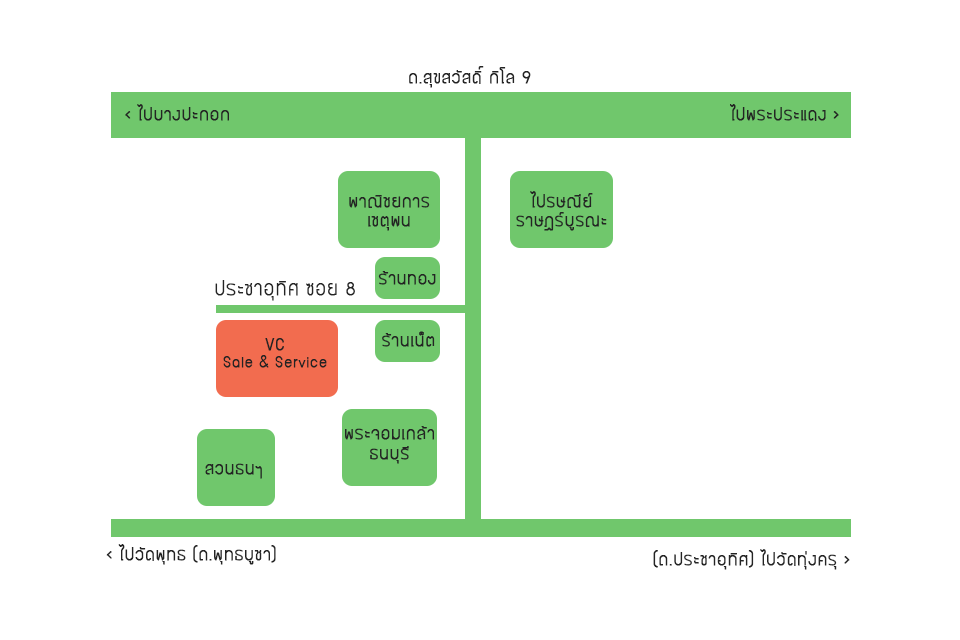
<style>
.page{position:relative;width:960px;height:640px;background:#ffffff}
.page>*{position:absolute;margin:0}
.t1{font:16px "BangnaNew";color:#242424;font-weight:bold}
.t2{font:18px "BangnaNew";color:#242424;font-weight:bold}
.t3{font:14px "BangnaNew";color:#242424;font-weight:bold}
</style>
<div class="page">
<p class="t1" style="left:409px;top:66px;width:122px;height:22px">ถ.สุขสวัสดิ์ กิโล 9</p>
<p class="t1" style="left:125px;top:104px;width:104px;height:17px">&lt; ไปบางปะกอก</p>
<p class="t1" style="left:730px;top:104px;width:109px;height:17px">ไปพระประแดง &gt;</p>
<p class="t1" style="left:349px;top:195px;width:81px;height:36px;text-align:center">พาณิชยการ<br>เชตุพน</p>
<p class="t1" style="left:516px;top:191px;width:91px;height:40px;text-align:center">ไปรษณีย์<br>ราษฎร์บูรณะ</p>
<p class="t2" style="left:215px;top:280px;width:140px;height:21px">ประชาอุทิศ ซอย 8</p>
<p class="t1" style="left:378px;top:271px;width:58px;height:14px">ร้านทอง</p>
<p class="t3" style="left:223px;top:338px;width:104px;height:30px;text-align:center"><span class="t1">VC <br></span>Sale &amp; Service</p>
<p class="t1" style="left:382px;top:331px;width:53px;height:16px">ร้านเน็ต</p>
<p class="t1" style="left:345px;top:426px;width:89px;height:38px;text-align:center">พระจอมเกล้า<br>ธนบุรี</p>
<p class="t1" style="left:205px;top:463px;width:57px;height:16px">สวนธนฯ</p>
<p class="t1" style="left:106px;top:544px;width:170px;height:21px">&lt; ไปวัดพุทธ (ถ.พุทธบูชา)</p>
<p class="t1" style="left:653px;top:549px;width:197px;height:21px">(ถ.ประชาอุทิศ) ไปวัดทุ่งครุ &gt;</p>
</div>
